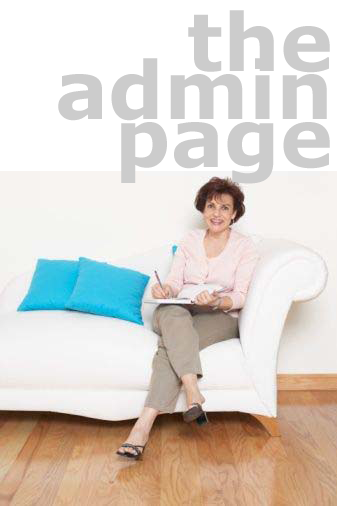
<style>
.page{position:relative;width:337px;height:506px;background:#ffffff}
.page>*{position:absolute;margin:0}
.t1{font:80px/48px "Verdana-Bold";color:#cccccc}
</style>
<div class="page">
<p class="t1" style="left:58px;top:10px;width:272px;height:174px;text-align:right">the<br>admin<br>page</p>
</div>
